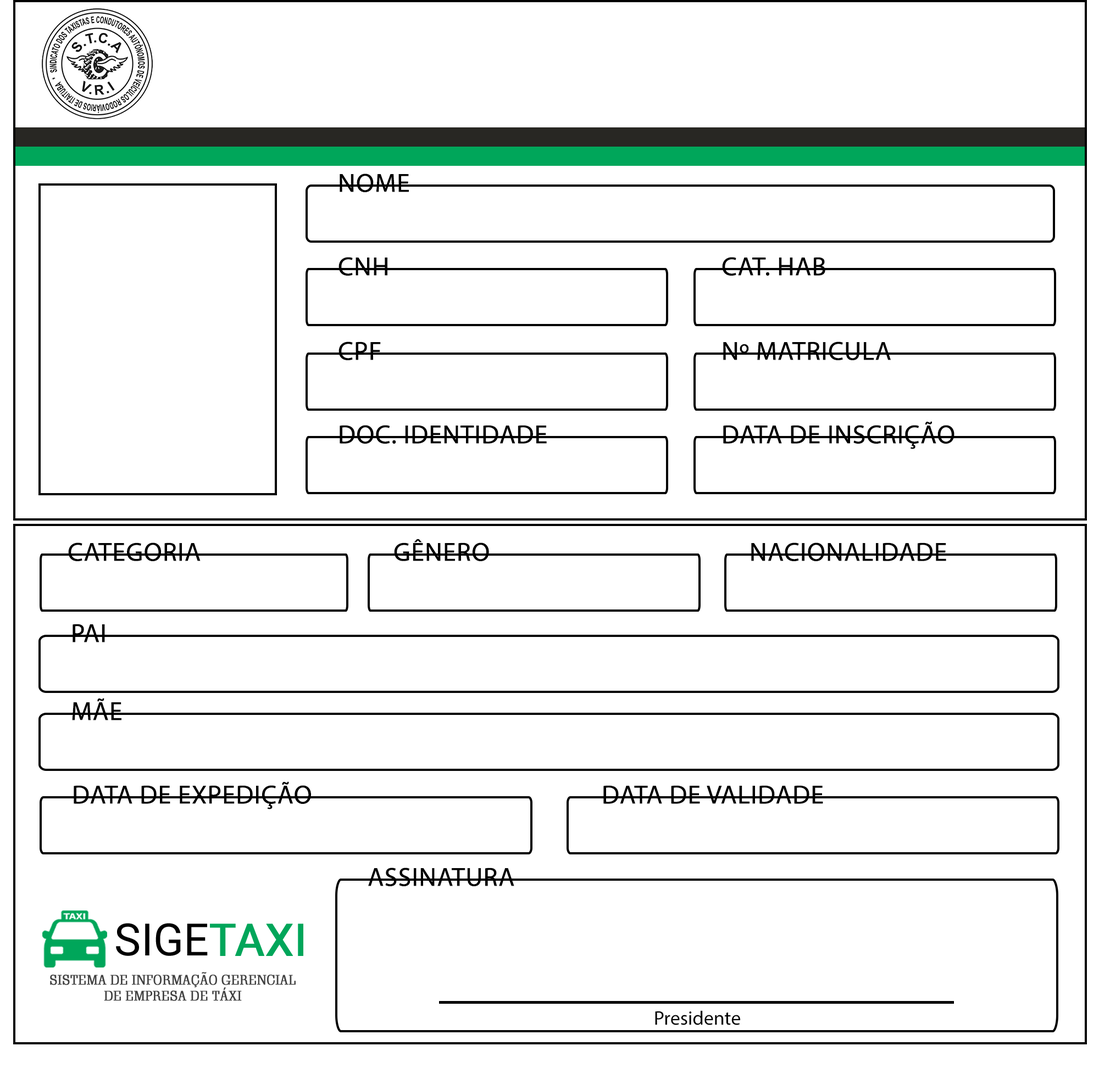
<style>
.page{position:relative;width:1099px;height:1085px;background:#ffffff}
.page>*{position:absolute;margin:0}
.t1{font:26.4px "MyriadPro-Regular";color:#000000;text-transform:uppercase;font-weight:bold}
.t2{font:26.4px "MyriadPro-Regular";color:#000000;font-weight:bold}
.t3{font:19.8px "MyriadPro-Regular";color:#000000}
</style>
<div class="page">
<p class="t1" style="left:339px;top:174px;width:70px;height:18px">Nome</p>
<p class="t2" style="left:338px;top:257px;width:49px;height:19px">CNH</p>
<p class="t2" style="left:722px;top:257px;width:103px;height:19px">CAT. HAB</p>
<p class="t2" style="left:338px;top:342px;width:43px;height:18px">CPF</p>
<p class="t1" style="left:723px;top:342px;width:167px;height:18px">nº mATRICULA</p>
<p class="t2" style="left:339px;top:425px;width:208px;height:19px">DOC. IDENTIDADE</p>
<p class="t1" style="left:723px;top:421px;width:231px;height:28px">DATA DE INSCRIÇÃO</p>
<p class="t1" style="left:68px;top:543px;width:132px;height:18px">Categoria</p>
<p class="t2" style="left:394px;top:539px;width:95px;height:22px">GÊNERO</p>
<p class="t1" style="left:751px;top:543px;width:195px;height:18px">Nacionalidade</p>
<p class="t1" style="left:73px;top:624px;width:32px;height:19px">PAI</p>
<p class="t1" style="left:72px;top:698px;width:49px;height:23px">mÃE</p>
<p class="t2" style="left:74px;top:782px;width:237px;height:28px">DATA DE EXPEDIÇÃO</p>
<p class="t1" style="left:603px;top:785px;width:220px;height:19px">data de validade</p>
<p class="t1" style="left:368px;top:868px;width:146px;height:19px">Assinatura</p>
<p class="t3" style="left:655px;top:1011px;width:85px;height:15px"><span class="t2"><br></span>Presidente</p>
</div>
